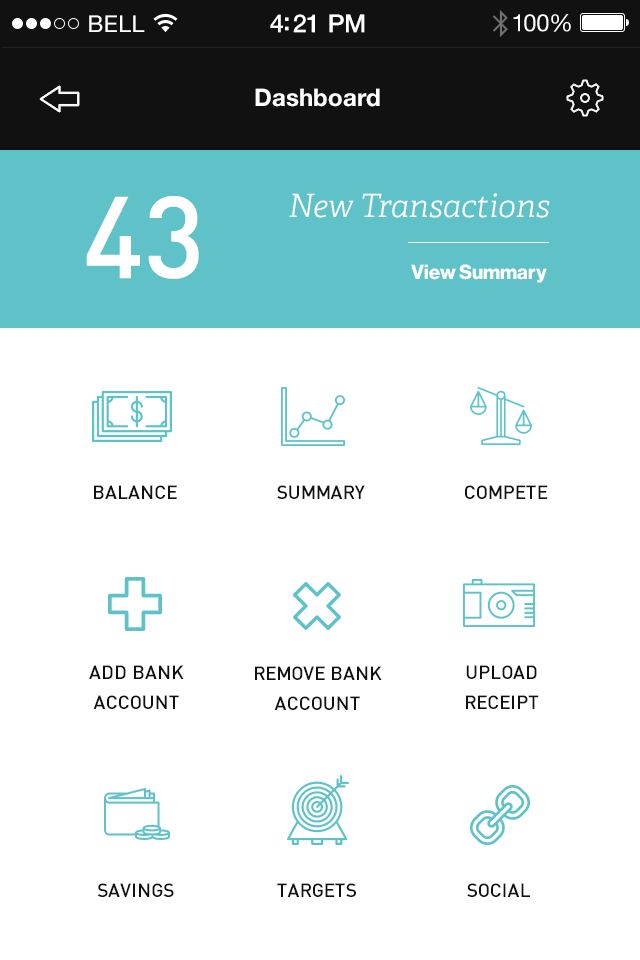
<style>
.page{position:relative;width:640px;height:960px;background:#ffffff}
.page>*{position:absolute;margin:0}
.t1{font:23px "HelveticaNeue";letter-spacing:0.02em;color:#ffffff}
.t2{font:25px "HelveticaNeue-Medium";letter-spacing:-0.02em;color:#ffffff}
.t3{font:24px "HelveticaNeue";letter-spacing:-0.02em;color:#ffffff}
.t4{font:24px "HelveticaNeue-Bold";color:#ffffff}
.t5{font:114px "Dinmed";color:#ffffff;text-transform:uppercase}
.t6{font:32px "Adelle-LightItalic";color:#ffffff}
.t7{font:20px "HaasGrotDisp-75Bold";color:#ffffff}
.t8{font:19px "Dinmed";color:#111111;text-transform:uppercase}
.t9{font:19px/30px "Dinmed";color:#111111;text-transform:uppercase}
</style>
<div class="page">
<p class="t1" style="left:89px;top:15px;width:56px;height:17px">BELL</p>
<p class="t2" style="left:270px;top:14px;width:95px;height:19px">4:21 PM</p>
<p class="t3" style="left:513px;top:14px;width:58px;height:18px">100%</p>
<p class="t4" style="left:255px;top:88px;width:125px;height:19px">Dashboard</p>
<p class="t5" style="left:86px;top:196px;width:113px;height:83px">43</p>
<p class="t6" style="left:289px;top:193px;width:261px;height:25px">New Transactions</p>
<p class="t7" style="left:411px;top:264px;width:136px;height:19px">View Summary</p>
<p class="t8" style="left:94px;top:485px;width:83px;height:14px">Balance</p>
<p class="t8" style="left:277px;top:485px;width:88px;height:14px">Summary</p>
<p class="t8" style="left:465px;top:485px;width:83px;height:14px">Compete</p>
<p class="t9" style="left:89px;top:665px;width:95px;height:44px;text-align:center">Add Bank<br>Account</p>
<p class="t9" style="left:466px;top:665px;width:73px;height:44px;text-align:center">Upload <br>Receipt</p>
<p class="t9" style="left:255px;top:666px;width:127px;height:44px;text-align:center">Remove Bank<br>Account</p>
<p class="t8" style="left:97px;top:883px;width:77px;height:14px">Savings</p>
<p class="t8" style="left:277px;top:883px;width:79px;height:14px">Targets</p>
<p class="t8" style="left:467px;top:883px;width:63px;height:14px">Social</p>
</div>
